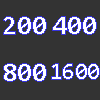
<style>
.page{position:relative;width:100px;height:100px;background:#333333}
.page>*{position:absolute;margin:0}
.t1{font:27px "Consolas";color:#ffffff}
.t2{font:23.2px "Consolas";color:#ffffff}
</style>
<div class="page">
<p class="t1" style="left:4px;top:17px;width:42px;height:17px">200</p>
<p class="t1" style="left:53px;top:17px;width:43px;height:17px">400</p>
<p class="t1" style="left:4px;top:64px;width:42px;height:17px">800</p>
<p class="t2" style="left:52px;top:64px;width:47px;height:15px">1600</p>
</div>
